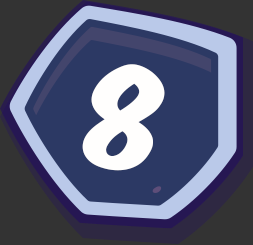
<style>
.page{position:relative;width:253px;height:245px;background:#2c3964}
.page>*{position:absolute;margin:0}
.t1{font:120px "KomikaAxis";color:#fffefd}
</style>
<div class="page">
<p class="t1" style="left:82px;top:64px;width:83px;height:107px">8</p>
</div>
